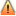
<style>
.page{position:relative;width:16px;height:16px}
.page>*{position:absolute;margin:0}
.t1{font:12px "TimesNewRomanPSMT"}
</style>
<div class="page">
<p class="t1" style="left:7px;top:4px;width:2px;height:10px">!</p>
<p class="t1" style="left:7px;top:4px;width:2px;height:10px">!</p>
</div>
